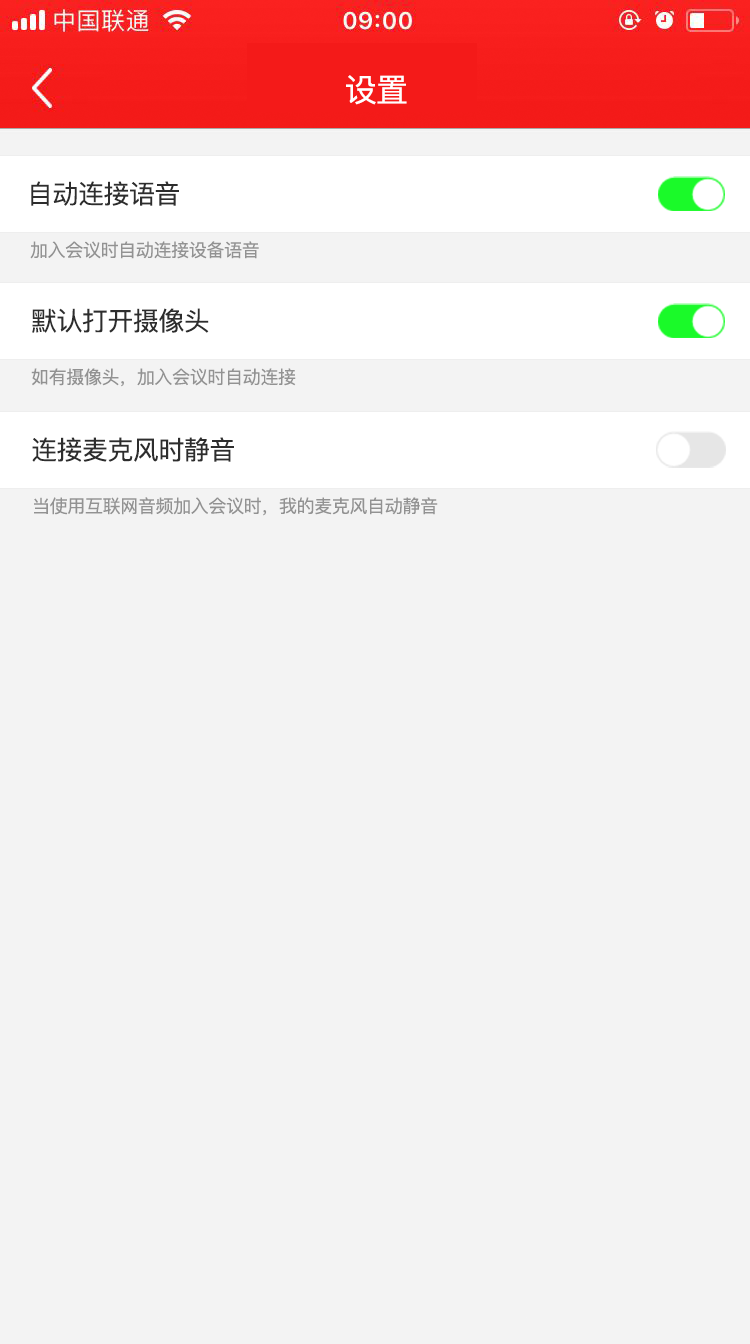
<style>
.page{position:relative;width:750px;height:1344px;background:#f3f3f3}
.page>*{position:absolute;margin:0}
.t1{font:32px "PingFangSC-Regular";letter-spacing:-0.02em;color:#ffffff}
.t2{font:26px "PingFangSC-Regular";letter-spacing:-0.02em;color:#2d2d2d}
.t3{font:18px "PingFangSC-Regular";letter-spacing:-0.02em;color:#929292}
</style>
<div class="page">
<p class="t1" style="left:346px;top:75px;width:61px;height:30px">设置</p>
<p class="t2" style="left:31px;top:181px;width:148px;height:25px">自动连接语音</p>
<p class="t3" style="left:30px;top:241px;width:229px;height:18px">加入会议时自动连接设备语音</p>
<p class="t2" style="left:32px;top:308px;width:177px;height:25px">默认打开摄像头</p>
<p class="t3" style="left:31px;top:368px;width:265px;height:19px">如有摄像头，加入会议时自动连接</p>
<p class="t2" style="left:32px;top:437px;width:202px;height:25px">连接麦克风时静音</p>
<p class="t3" style="left:34px;top:497px;width:404px;height:19px">当使用互联网音频加入会议时，我的麦克风自动静音</p>
</div>
